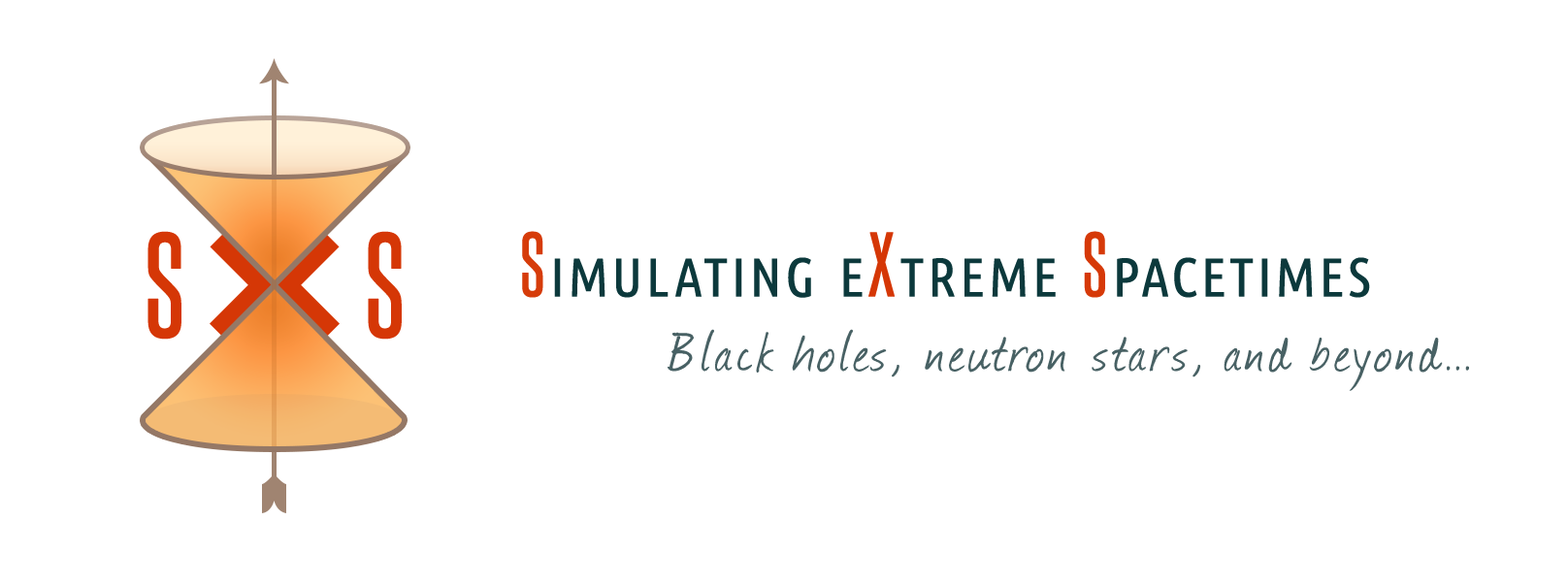
<style>
.page{position:relative;width:1568px;height:586px;background:#ffffff}
.page>*{position:absolute;margin:0}
.t1{font:126.1px "SteelfishRg-Regular";letter-spacing:0.23em;color:#d53706;font-weight:bold}
.t2{font:77.6px "UbuntuCondensed-Regular";letter-spacing:0.05em;color:#0c393c;font-variant:small-caps;font-weight:bold}
.t3{font:77.6px "UbuntuCondensed-Regular";letter-spacing:0.05em;color:#d63c0a;font-variant:small-caps;font-weight:bold}
.t4{font:77.6px "SteelfishRg-Regular";letter-spacing:0.05em;color:#d63c0a;font-variant:small-caps;font-weight:bold}
.t5{font:77.6px "SteelfishRg-Regular";letter-spacing:0.05em;color:#d53706;font-variant:small-caps;font-weight:bold}
.t6{font:77.6px "SteelfishRg-Regular";letter-spacing:0.05em;color:#d63908;font-variant:small-caps;font-weight:bold}
.t7{font:67.9px "Journal";letter-spacing:0.075em;color:#486164}
.t8{font:67.9px "Journal";color:#486164}
</style>
<div class="page">
<p class="t1" style="left:147px;top:231px;width:255px;height:109px">S   S</p>
<p class="t2" style="left:522px;top:231px;width:848px;height:67px"><span class="t3"> </span><span class="t4">S</span>imulating e<span class="t5">X</span>treme <span class="t6">S</span>pacetimes</p>
<p class="t7" style="left:668px;top:329px;width:801px;height:62px">Black holes, neutron stars, and beyond<span class="t8">...</span></p>
</div>
